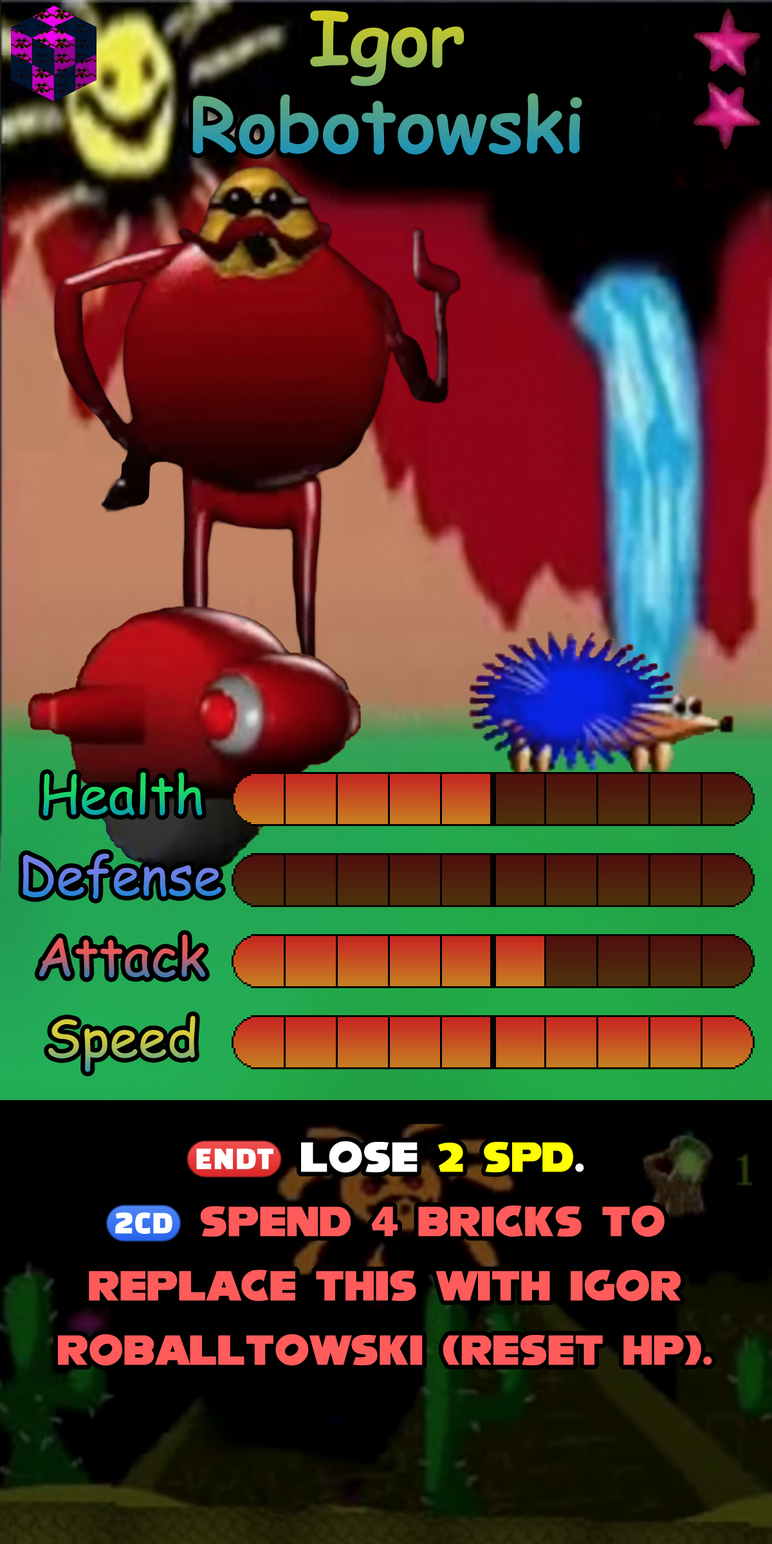
<style>
.page{position:relative;width:772px;height:1544px}
.page>*{position:absolute;margin:0}
.t1{font:128.7px/86.9px "ComicSansMS-Bold"}
.t2{font:90.1px "ComicSansMS"}
.t3{font:64.3px/64.3px "NiseSegaSonic";color:#ff5b5b}
.t4{font:64.3px/64.3px "stoogedings-Regular";color:#ffffff}
.t5{font:64.3px/64.3px "NiseSegaSonic";color:#ffffff}
.t6{font:64.3px/64.3px "NiseSegaSonic";color:#ffff00}
.t7{font:64.3px/64.3px "stoogedings-Regular";color:#ff5b5b}
</style>
<div class="page">
<p class="t1" style="left:192px;top:10px;width:390px;height:146px;text-align:center">Igor<br>Robotowski</p>
<p class="t2" style="left:43px;top:772px;width:160px;height:45px">Health</p>
<p class="t2" style="left:23px;top:854px;width:198px;height:46px">Defense</p>
<p class="t2" style="left:39px;top:934px;width:166px;height:44px">Attack</p>
<p class="t2" style="left:48px;top:1016px;width:148px;height:56px">Speed</p>
<p class="t3" style="left:58px;top:1140px;width:654px;height:226px;text-align:center"><span class="t4">(ENDT)</span><span class="t5"> lose </span><span class="t6">2 SPD</span><span class="t5">.<br></span><span class="t7">(2CD)</span> spend 4 Bricks to replace this with Igor Roballtowski (reset HP).</p>
</div>
